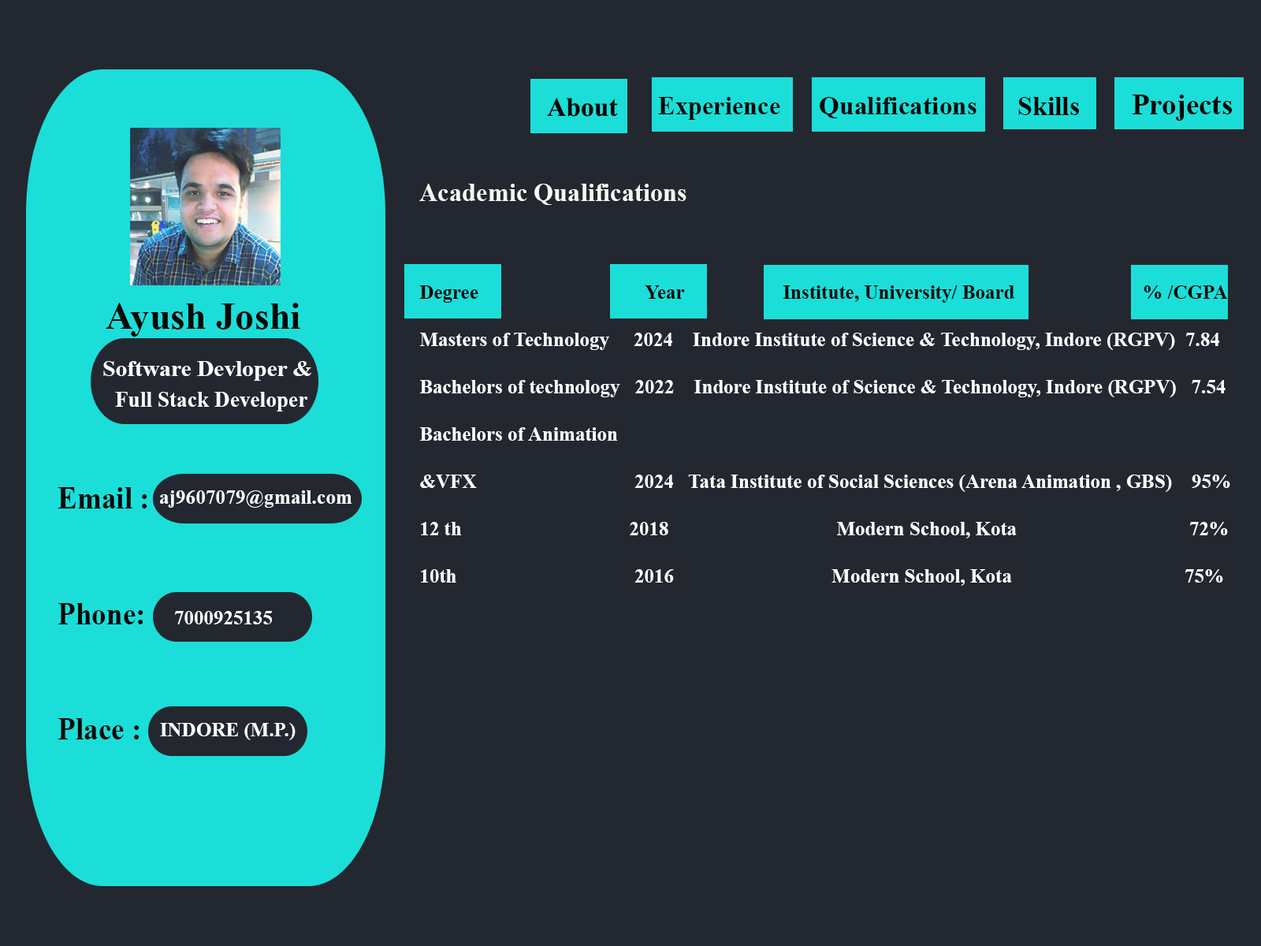
<style>
.page{position:relative;width:1261px;height:946px;background:#232730}
.page>*{position:absolute;margin:0}
.t1{font:26.5px "TimesNewRomanPS-BoldMT";color:#050505}
.t2{font:25.8px "TimesNewRomanPS-BoldMT";color:#060606}
.t3{font:25.8px "TimesNewRomanPS-BoldMT";color:#070707}
.t4{font:26.5px "TimesNewRomanPS-BoldMT";color:#010101}
.t5{font:29.2px "TimesNewRomanPS-BoldMT";color:#030303}
.t6{font:25.8px "TimesNewRomanPS-BoldMT";color:#f7f8f1}
.t7{font:19.7px "TimesNewRomanPS-BoldMT";color:#ffffff}
.t8{font:19.7px "TimesNewRomanPS-BoldMT";color:#070707}
.t9{font:19.7px "TimesNewRomanPS-BoldMT";color:#050505}
.t10{font:38.1px "TimesNewRomanPS-BoldMT";color:#080808}
.t11{font:23.1px "TimesNewRomanPS-BoldMT";color:#fcfdfe}
.t12{font:21.8px "TimesNewRomanPS-BoldMT";color:#ffffff}
.t13{font:31.7px "TimesNewRomanPS-BoldMT";color:#090909;scale:0.93 1}
</style>
<div class="page">
<p class="t1" style="left:547px;top:98px;width:71px;height:19px">About</p>
<p class="t2" style="left:658px;top:97px;width:122px;height:23px">Experience</p>
<p class="t3" style="left:820px;top:97px;width:156px;height:21px">Qualifications</p>
<p class="t4" style="left:1018px;top:97px;width:61px;height:18px">Skills</p>
<p class="t5" style="left:1132px;top:95px;width:101px;height:26px">Projects</p>
<p class="t6" style="left:419px;top:184px;width:267px;height:21px">Academic Qualifications</p>
<p class="t7" style="left:419px;top:285px;width:811px;height:301px"><span class="t8">Degree                                  Year                    </span><span class="t9">Institute, University/ Board                          </span><span class="t8">% /CGPA<br></span>Masters of Technology     2024    Indore Institute of Science &amp; Technology, Indore (RGPV)  7.84<br>Bachelors of technology   2022    Indore Institute of Science &amp; Technology, Indore (RGPV)   7.54<br>Bachelors of Animation <br>&amp;VFX                                2024   Tata Institute of Social Sciences (Arena Animation , GBS)    95%<br>12 th                                  2018                                  Modern School, Kota                                   72%<br>10th                                    2016                                Modern School, Kota                                   75%</p>
<p class="t10" style="left:106px;top:303px;width:194px;height:34px">Ayush Joshi</p>
<p class="t11" style="left:103px;top:361px;width:208px;height:20px">Software Devloper &amp;</p>
<p class="t12" style="left:115px;top:392px;width:192px;height:19px">Full Stack Developer</p>
<p class="t13" style="left:58px;top:487px;width:89px;height:252px">Email : <br><br>Phone:<br><br>Place :</p>
<p class="t7" style="left:160px;top:490px;width:192px;height:18px">aj9607079@gmail.com</p>
<p class="t7" style="left:174px;top:611px;width:98px;height:13px">7000925135</p>
<p class="t7" style="left:160px;top:723px;width:136px;height:17px">INDORE (M.P.)</p>
</div>
